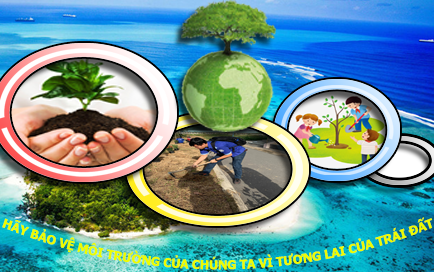
<style>
.page{position:relative;width:434px;height:272px}
.page>*{position:absolute;margin:0}
.t1{font:12.6px "Tahoma-Bold";color:#edfc00;scale:0.93 1}
</style>
<div class="page">
<p class="t1" style="left:2px;top:217px;width:430px;height:53px;text-align:center">HÃY BẢO VỆ MÔI TRƯỜNG CỦA CHÚNG TA VÌ TƯƠNG LAI CỦA TRÁI ĐẤT</p>
</div>
